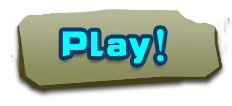
<style>
.page{position:relative;width:232px;height:106px;background:#ffffff}
.page>*{position:absolute;margin:0}
.t1{font:36px "HYk2gj";color:#00ffff}
</style>
<div class="page">
<p class="t1" style="left:62px;top:29px;width:102px;height:35px">Play!</p>
</div>
